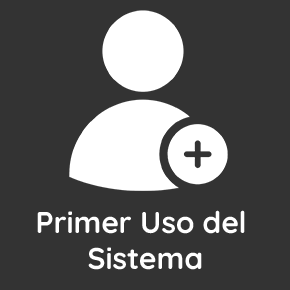
<style>
.page{position:relative;width:290px;height:290px;background:#333333}
.page>*{position:absolute;margin:0}
.t1{font:30px "Quicksand-Bold";color:#ffffff}
</style>
<div class="page">
<p class="t1" style="left:37px;top:210px;width:208px;height:60px;text-align:center">Primer Uso del <br>Sistema</p>
</div>
